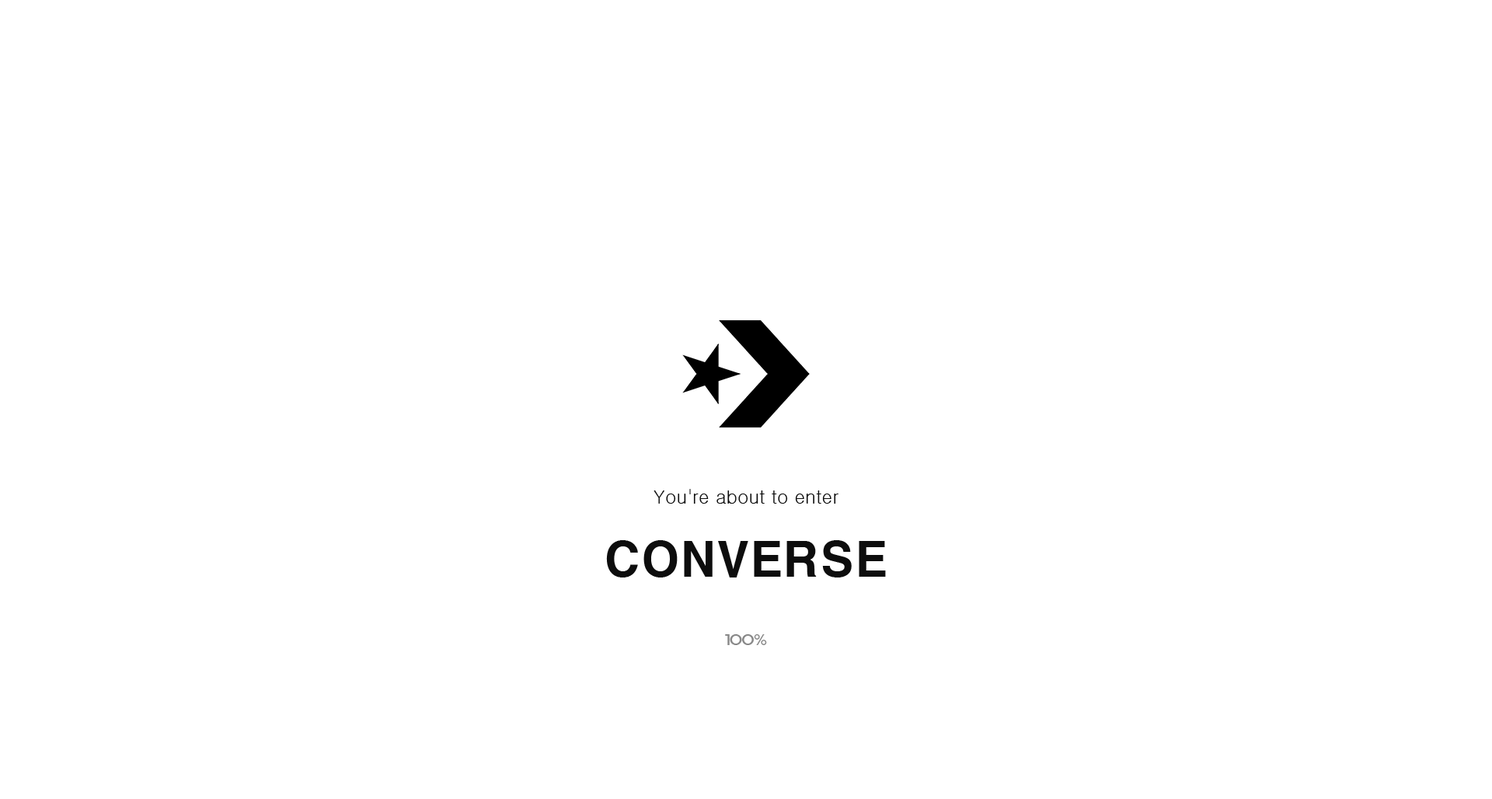
<style>
.page{position:relative;width:1492px;height:799px;background:#ffffff}
.page>*{position:absolute;margin:0}
.t1{font:18.7px "Gulim";color:#0d0d0d}
.t2{font:46.6px "H2gtrE";color:#0d0d0d}
.t3{font:14px "ExpoM-HM";color:#898989}
</style>
<div class="page">
<p class="t1" style="left:654px;top:489px;width:185px;height:15px">You're about to enter</p>
<p class="t2" style="left:606px;top:540px;width:280px;height:38px">CONVERSE</p>
<p class="t3" style="left:725px;top:634px;width:42px;height:11px">100%</p>
</div>
